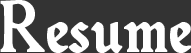
<style>
.page{position:relative;width:191px;height:53px;background:#333333}
.page>*{position:absolute;margin:0}
.t1{font:70.8px "Hamlet-Tertia18";color:#ffffff;font-weight:bold}
</style>
<div class="page">
<p class="t1" style="left:0px;top:0px;width:191px;height:53px">Resume</p>
</div>
